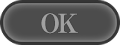
<style>
.page{position:relative;width:120px;height:45px;background:#4c4c4c}
.page>*{position:absolute;margin:0}
.t1{font:26px "RyuminPro-ExBold";letter-spacing:-0.08em;color:#a1a1a1}
</style>
<div class="page">
<p class="t1" style="left:41px;top:13px;width:37px;height:21px">OK</p>
</div>
